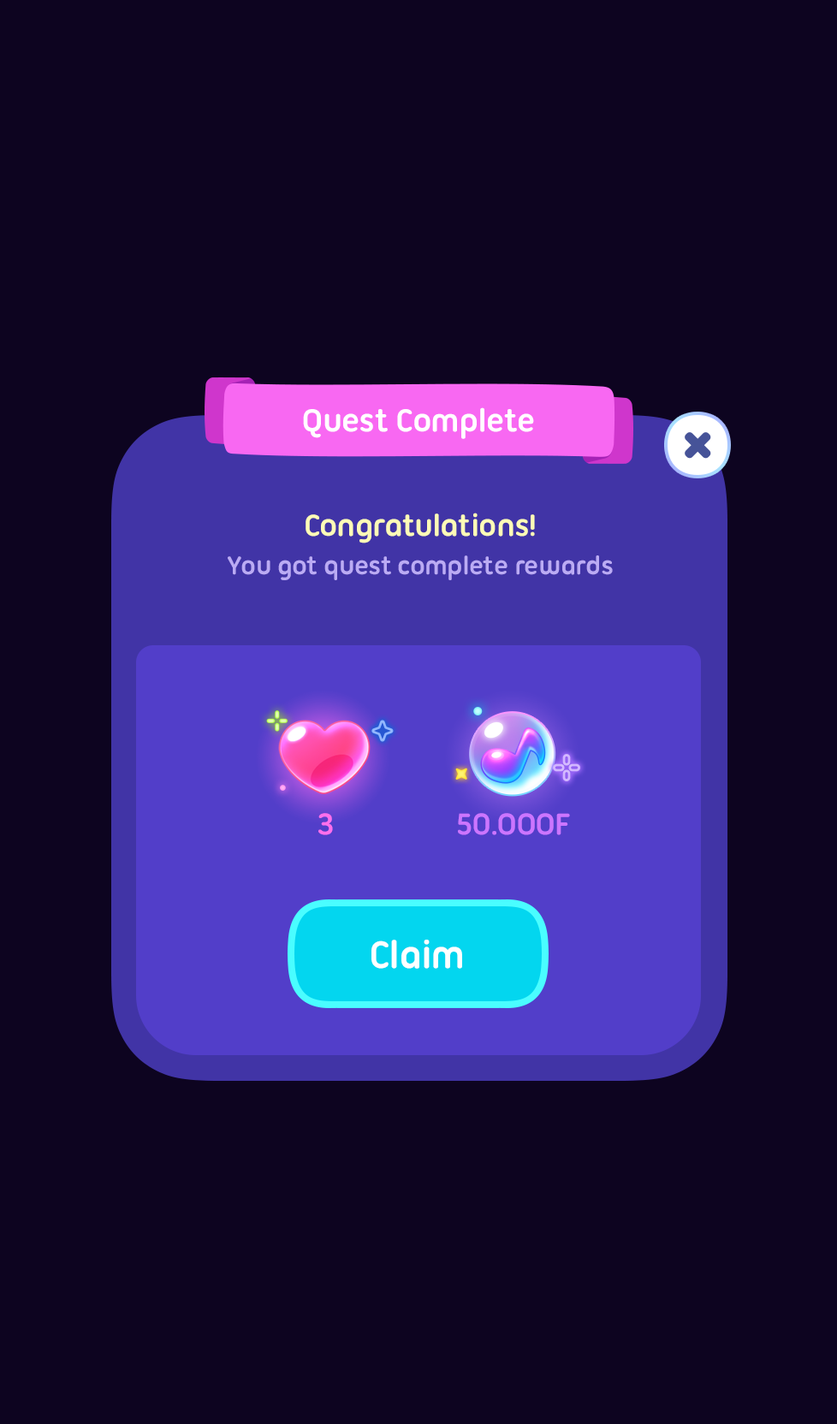
<style>
.page{position:relative;width:837px;height:1424px;background:#0d0420}
.page>*{position:absolute;margin:0}
.t1{font:34.2px "UbuntuTitling-Bold";letter-spacing:-0.025em;color:#ffffff}
.t2{font:32.5px "UbuntuTitling-Bold";letter-spacing:-0.025em;color:#fefbb7}
.t3{font:27.4px "UbuntuTitling-Bold";letter-spacing:-0.025em;color:#bbabf4}
.t4{font:32.5px "UbuntuTitling-Bold";letter-spacing:-0.025em;color:#ff6fec}
.t5{font:32.5px "UbuntuTitling-Bold";letter-spacing:-0.025em;color:#cc75ff;text-transform:uppercase}
.t6{font:41.1px "UbuntuTitling-Bold";letter-spacing:-0.025em;color:#ffffff}
</style>
<div class="page">
<p class="t1" style="left:303px;top:407px;width:231px;height:32px">Quest Complete</p>
<p class="t2" style="left:306px;top:513px;width:229px;height:31px">Congratulations!</p>
<p class="t3" style="left:228px;top:556px;width:385px;height:24px">You got quest complete rewards</p>
<p class="t4" style="left:318px;top:813px;width:15px;height:22px">3</p>
<p class="t5" style="left:458px;top:813px;width:112px;height:22px">50.ooof</p>
<p class="t6" style="left:372px;top:940px;width:90px;height:29px">Claim</p>
</div>
